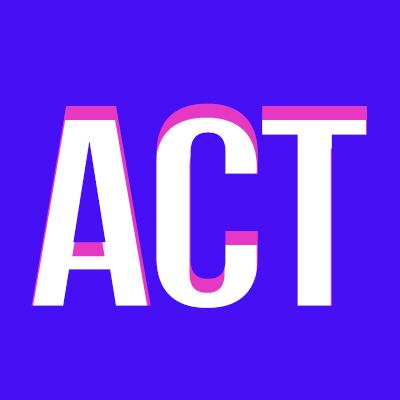
<style>
.page{position:relative;width:400px;height:400px;background:#470ff4}
.page>*{position:absolute;margin:0}
.t1{font:285px "BebasNeue";letter-spacing:-0.02em;color:#ffffff;scale:1.08 1}
</style>
<div class="page">
<p class="t1" style="left:31px;top:103px;width:336px;height:205px">ACT</p>
</div>
